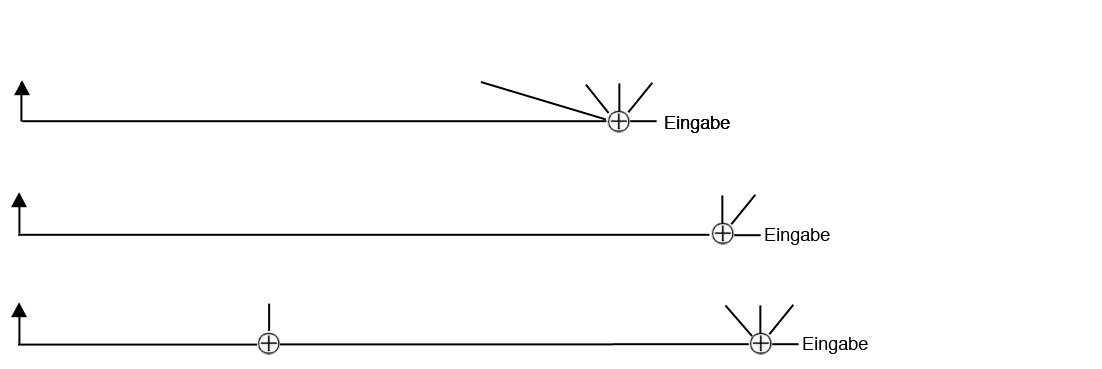
<style>
.page{position:relative;width:1102px;height:369px;background:#ffffff}
.page>*{position:absolute;margin:0}
.t1{font:18px "Helvetica";color:#000000}
</style>
<div class="page">
<p class="t1" style="left:665px;top:116px;width:65px;height:17px">Eingabe</p>
<p class="t1" style="left:665px;top:116px;width:65px;height:17px">Eingabe</p>
<p class="t1" style="left:765px;top:228px;width:65px;height:17px">Eingabe</p>
<p class="t1" style="left:803px;top:337px;width:65px;height:17px">Eingabe</p>
</div>
